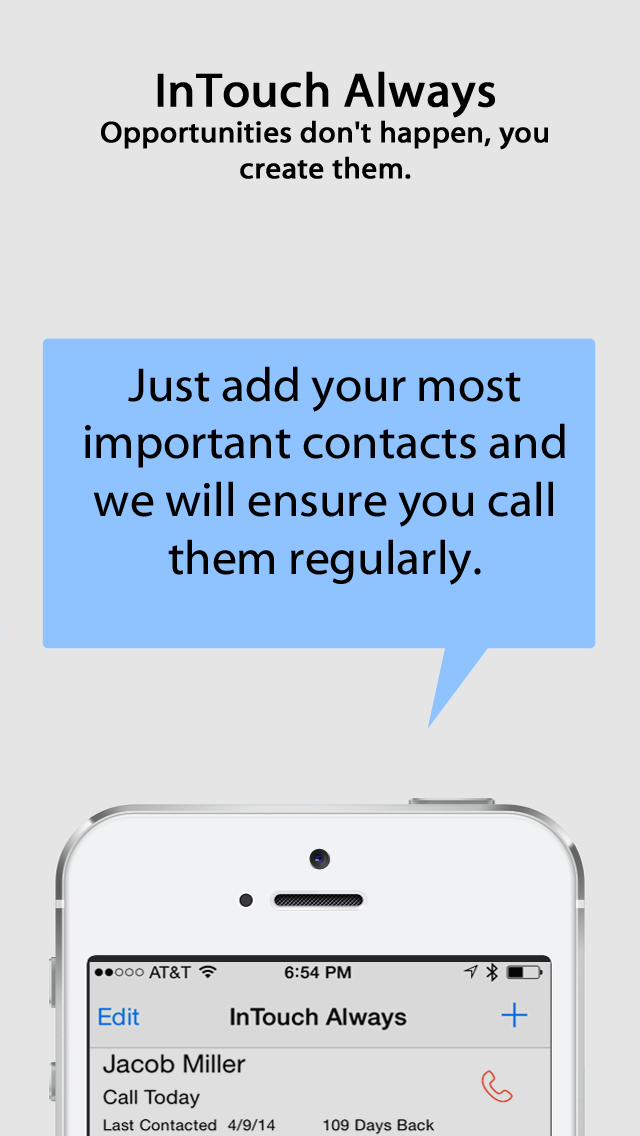
<style>
.page{position:relative;width:640px;height:1136px;background:#e5e5e5}
.page>*{position:absolute;margin:0}
.t1{font:30px "Myriad-Web";color:#000000;font-weight:bold}
.t2{font:48px "Myriad-Web";color:#000000;font-weight:bold}
.t3{font:48px "Myriad-Web";color:#000000}
</style>
<div class="page">
<p class="t1" style="left:101px;top:71px;width:447px;height:108px;text-align:center"><span class="t2"><br>InTouch Always<br></span>Opportunities don't happen, you create them.</p>
<p class="t3" style="left:85px;top:366px;width:480px;height:219px;text-align:center">Just add your most important contacts and we will ensure you call them regularly.</p>
</div>
